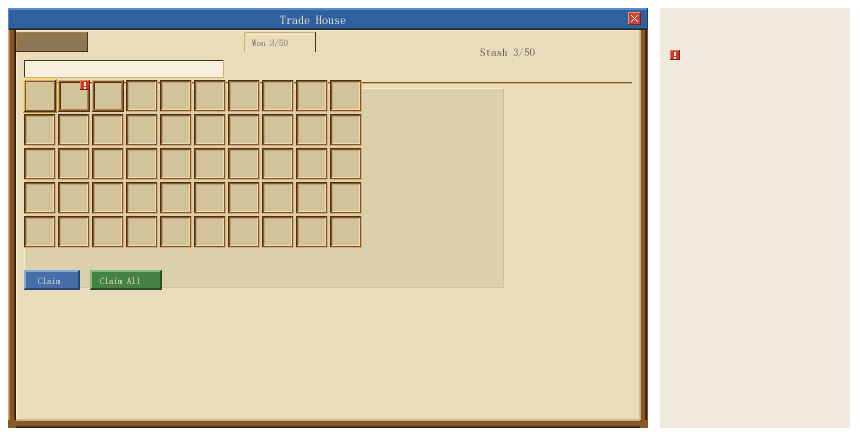
<style>
.page{position:relative;width:860px;height:440px;background:#e8dcba}
.page>*{position:absolute;margin:0}
.t1{font:12px "SimSun"}
.t2{font:9px "SimSun"}
.t3{font:11px "SimSun"}
</style>
<div class="page">
<p class="t1" style="left:280px;top:15px;width:66px;height:9px">Trade House</p>
<p class="t2" style="left:252px;top:39px;width:36px;height:8px">Won 3/50</p>
<p class="t3" style="left:480px;top:47px;width:55px;height:10px">Stash 3/50</p>
<p class="t2" style="left:38px;top:277px;width:23px;height:7px">Claim</p>
<p class="t2" style="left:100px;top:277px;width:40px;height:7px">Claim All</p>
</div>
